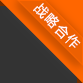
<style>
.page{position:relative;width:83px;height:83px;background:#333333}
.page>*{position:absolute;margin:0}
.t1{font:13px "MicrosoftYaHei";letter-spacing:0.14em;color:#ffffff}
</style>
<div class="page">
<p class="t1" style="left:33px;top:3px;width:48px;height:45px;rotate:45deg">战略合作</p>
</div>
